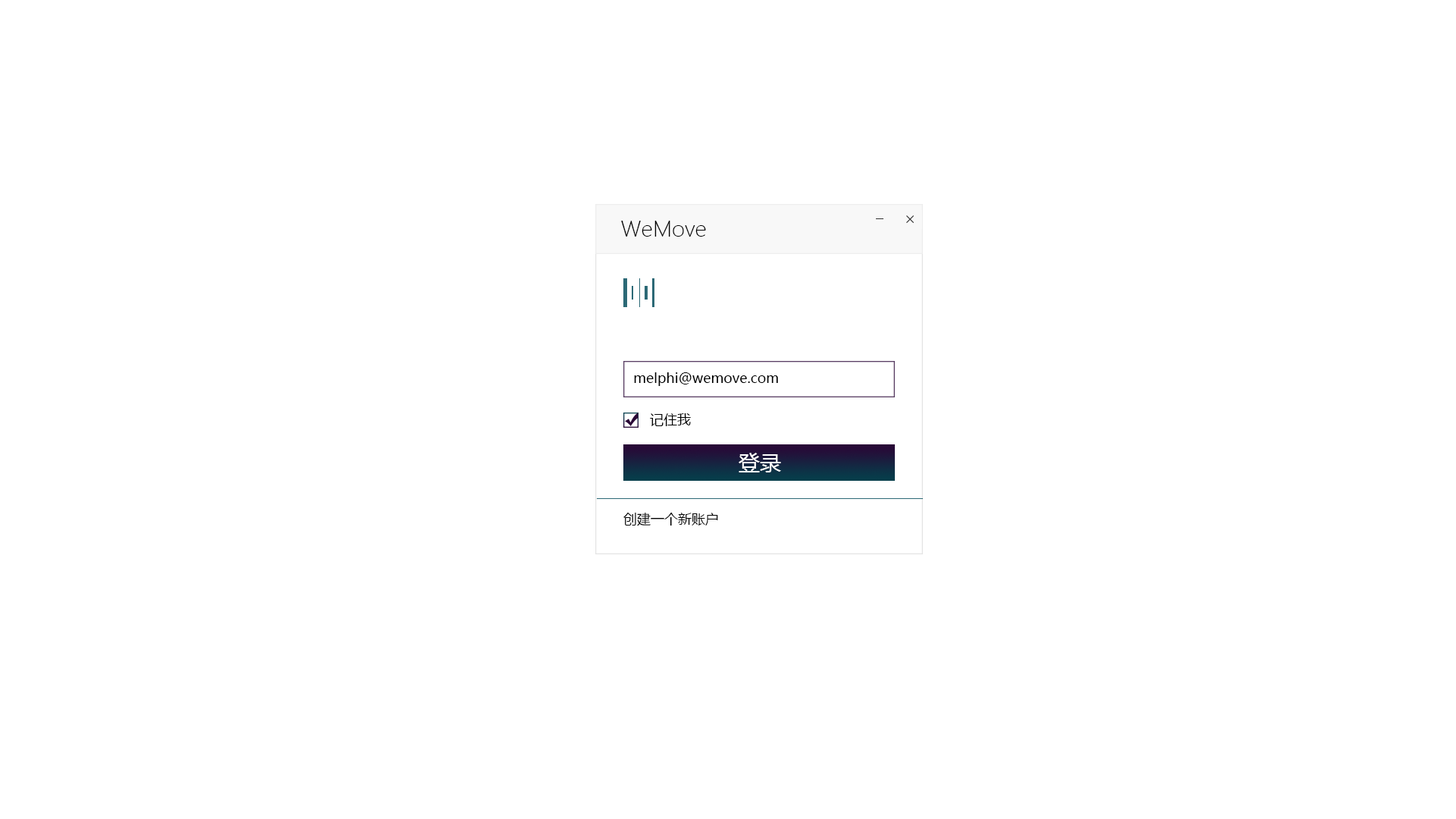
<style>
.page{position:relative;width:1456px;height:819px;background:#ffffff}
.page>*{position:absolute;margin:0}
.t1{font:21.2px "MicrosoftYaHeiUILight";color:#000000}
.t2{font:13.6px "MicrosoftYaHeiUI";color:#000000}
.t3{font:21.2px "MicrosoftYaHeiUI";color:#ffffff}
</style>
<div class="page">
<p class="t1" style="left:621px;top:221px;width:85px;height:16px">WeMove</p>
<p class="t2" style="left:634px;top:372px;width:144px;height:14px">melphi@wemove.com</p>
<p class="t2" style="left:650px;top:413px;width:41px;height:13px">记住我</p>
<p class="t3" style="left:739px;top:453px;width:42px;height:19px">登录</p>
<p class="t2" style="left:623px;top:513px;width:95px;height:13px">创建一个新账户</p>
</div>
